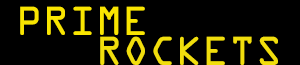
<style>
.page{position:relative;width:300px;height:65px;background:#000000}
.page>*{position:absolute;margin:0}
.t1{font:43.3px "OCRAExtended";letter-spacing:0.01em;color:#f9e501}
.t2{font:43.3px "OCRAExtended";letter-spacing:0.01em;color:#f1de0d}
</style>
<div class="page">
<p class="t1" style="left:20px;top:6px;width:125px;height:29px">PRIME</p>
<p class="t2" style="left:100px;top:36px;width:178px;height:29px">ROCKETS</p>
</div>
